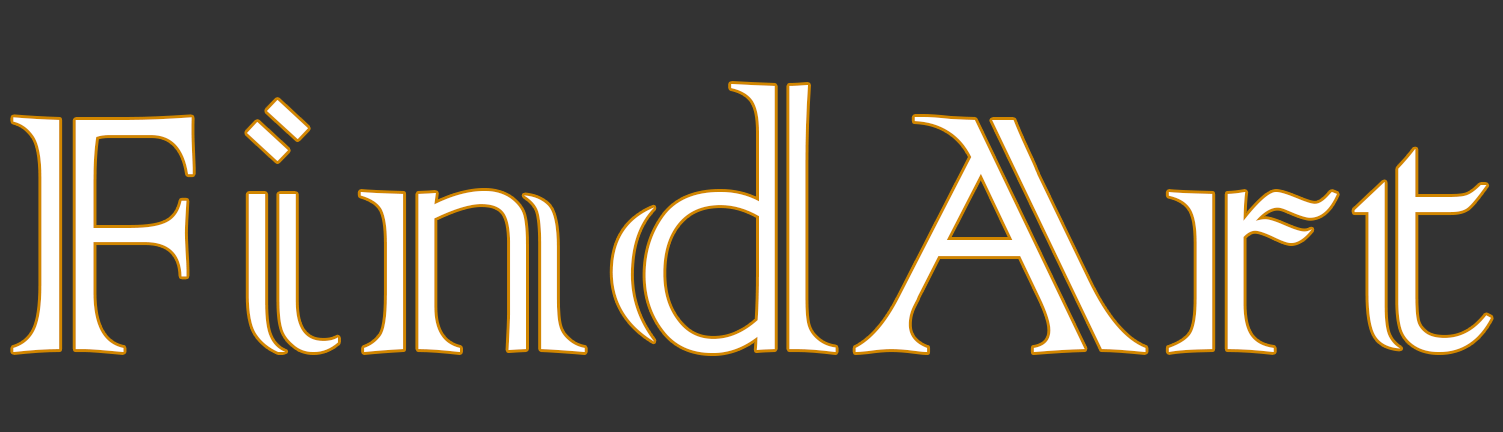
<style>
.page{position:relative;width:1503px;height:432px;background:#333333}
.page>*{position:absolute;margin:0}
.t1{font:445px "ColonnaMT";letter-spacing:0.02em;color:#ffffff}
</style>
<div class="page">
<p class="t1" style="left:13px;top:84px;width:1478px;height:269px">FindArt</p>
</div>
